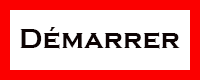
<style>
.page{position:relative;width:200px;height:80px;background:#ffffff}
.page>*{position:absolute;margin:0}
.t1{font:28.2px "CopperplateGothic-Bold";color:#0d0404}
</style>
<div class="page">
<p class="t1" style="left:20px;top:27px;width:160px;height:22px">Démarrer</p>
</div>
